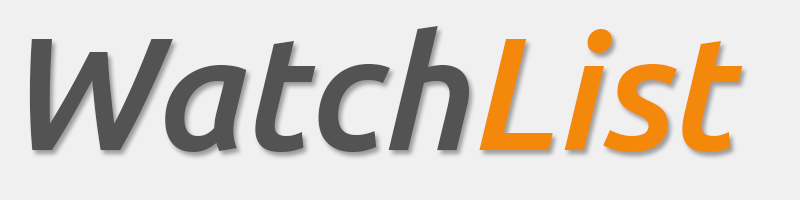
<style>
.page{position:relative;width:800px;height:200px;background:#f0f0f0}
.page>*{position:absolute;margin:0}
.t1{font:160px "Ubuntu-MediumItalic";color:#535353}
.t2{font:160px "Ubuntu-MediumItalic";color:#f4880a}
</style>
<div class="page">
<p class="t1" style="left:29px;top:26px;width:440px;height:126px">Watch</p>
<p class="t2" style="left:479px;top:29px;width:264px;height:123px">List</p>
</div>
